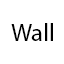
<style>
.page{position:relative;width:64px;height:64px;background:#ffffff}
.page>*{position:absolute;margin:0}
.t1{font:25px "MyriadPro-Regular";color:#000000}
</style>
<div class="page">
<p class="t1" style="left:11px;top:23px;width:42px;height:18px">Wall</p>
</div>
